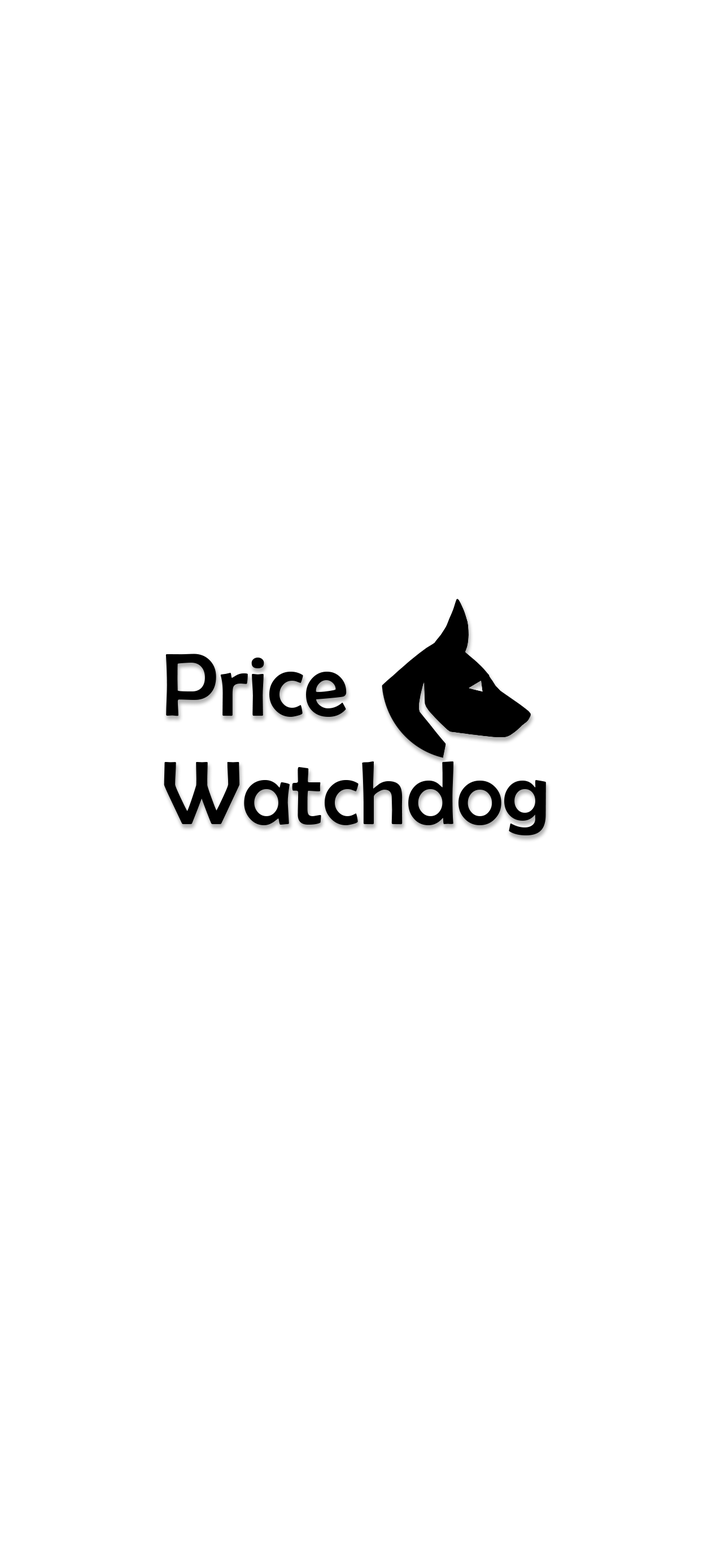
<style>
.page{position:relative;width:725px;height:1568px;background:#ffffff}
.page>*{position:absolute;margin:0}
.t1{font:90.3px "BerlinSansFB-Reg";color:#000000}
</style>
<div class="page">
<p class="t1" style="left:164px;top:654px;width:382px;height:181px">Price<br>Watchdog</p>
</div>
